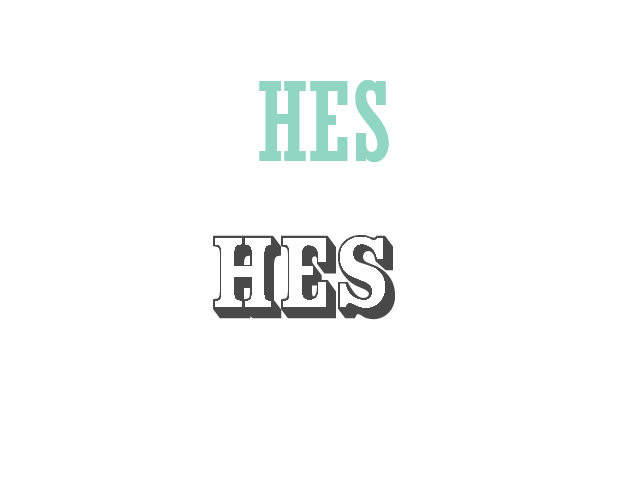
<style>
.page{position:relative;width:640px;height:480px;background:#ffffff}
.page>*{position:absolute;margin:0}
.t1{font:109.2px "Rockwell-Condensed";color:#91d5c3}
</style>
<div class="page">
<p class="t1" style="left:259px;top:80px;width:130px;height:82px">HES</p>
</div>
